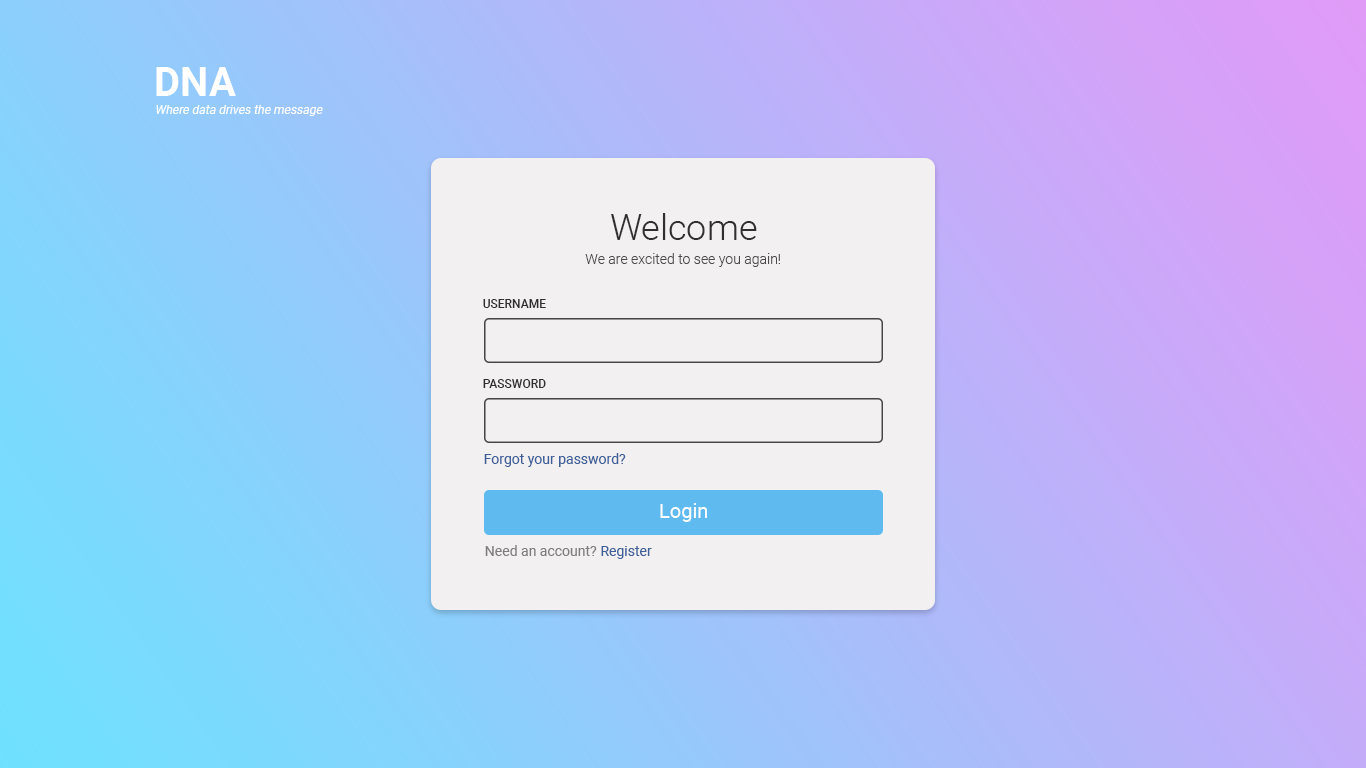
<style>
.page{position:relative;width:1366px;height:768px}
.page>*{position:absolute;margin:0}
.t1{font:40px "Roboto-Bold";color:#ffffff}
.t2{font:12px "Roboto-Regular";color:#ffffff;font-style:italic}
.t3{font:36px "Roboto-Light";color:#2f2f2f}
.t4{font:14px "Roboto-Light";color:#4b4b4b}
.t5{font:12px "Roboto-Medium";color:#2f2f2f}
.t6{font:14px "Roboto-Regular";color:#3d609b}
.t7{font:20px "Roboto-Regular";color:#ffffff}
.t8{font:14px "Roboto-Regular";color:#7e7e7e}
</style>
<div class="page">
<p class="t1" style="left:156px;top:67px;width:80px;height:29px">DNA</p>
<p class="t2" style="left:156px;top:105px;width:167px;height:11px">Where data drives the message</p>
<p class="t3" style="left:611px;top:213px;width:146px;height:27px">Welcome</p>
<p class="t4" style="left:585px;top:253px;width:195px;height:14px">We are excited to see you again!</p>
<p class="t5" style="left:483px;top:299px;width:63px;height:9px">USERNAME</p>
<p class="t5" style="left:483px;top:379px;width:63px;height:9px">PASSWORD</p>
<p class="t6" style="left:484px;top:453px;width:142px;height:14px">Forgot your password?</p>
<p class="t7" style="left:660px;top:503px;width:47px;height:19px">Login</p>
<p class="t8" style="left:485px;top:545px;width:112px;height:11px">Need an account?</p>
<p class="t6" style="left:601px;top:546px;width:51px;height:13px">Register</p>
</div>
